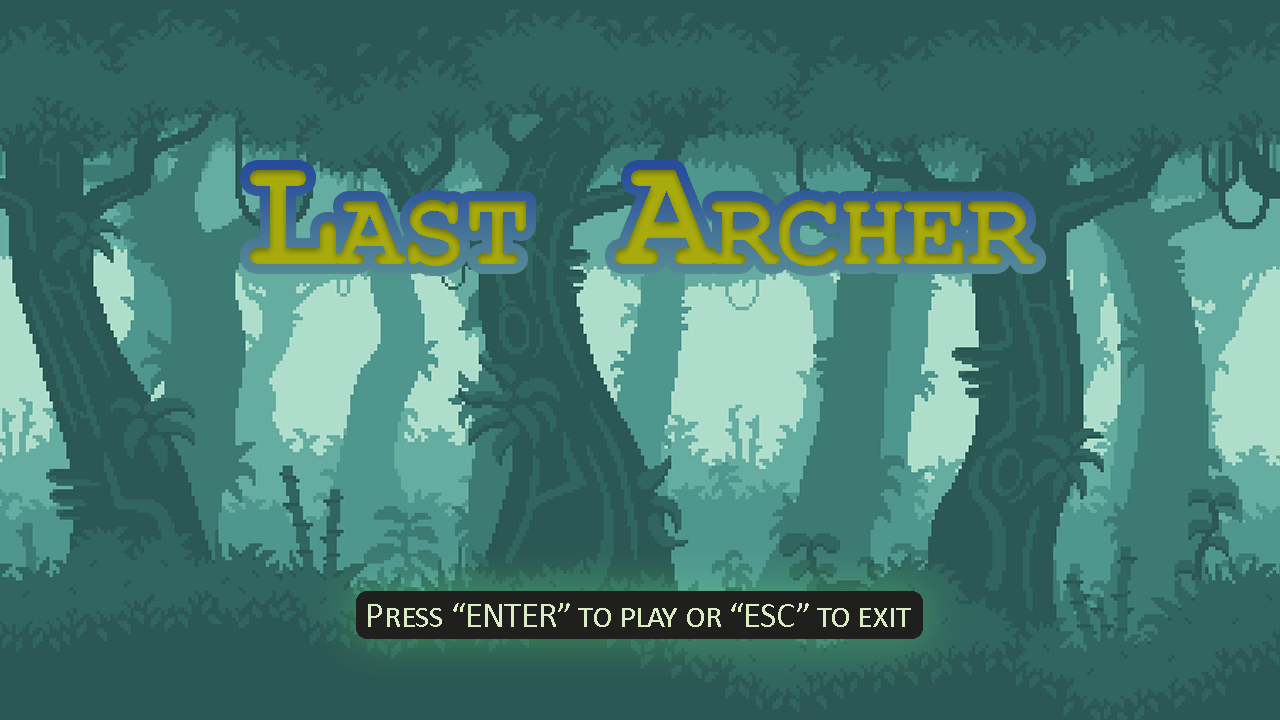
<style>
.page{position:relative;width:1280px;height:720px;background:#2b5754}
.page>*{position:absolute;margin:0}
.t1{font:159px "CourierNewPS-BoldMT";letter-spacing:-0.025em;color:#a9ab0d;font-variant:small-caps}
.t2{font:36px "Calibri";letter-spacing:-0.025em;color:#daecc4;font-variant:small-caps}
</style>
<div class="page">
<p class="t1" style="left:250px;top:170px;width:786px;height:96px">Last Archer</p>
<p class="t2" style="left:368px;top:603px;width:543px;height:24px">Press “ENTER” to play or “ESC” to exit</p>
</div>
